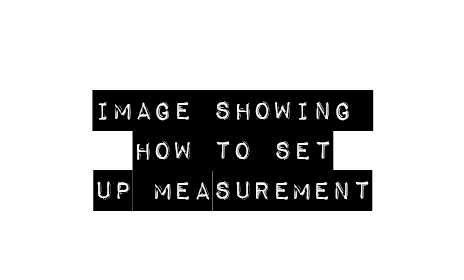
<style>
.page{position:relative;width:464px;height:280px;background:#ffffff}
.page>*{position:absolute;margin:0}
.t1{font:33.3px "ImpactLabel";color:#000000}
</style>
<div class="page">
<p class="t1" style="left:92px;top:90px;width:282px;height:121px;text-align:center">Image showing <br>how to set<br>up measurement</p>
</div>
